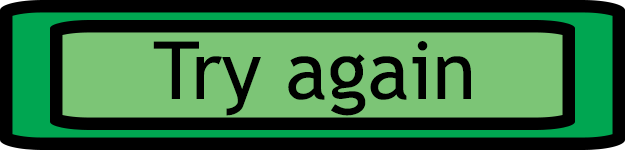
<style>
.page{position:relative;width:625px;height:150px;background:#7cc576}
.page>*{position:absolute;margin:0}
.t1{font:80px "TrebuchetMS";color:#000000}
</style>
<div class="page">
<p class="t1" style="left:153px;top:41px;width:318px;height:75px">Try again</p>
</div>
